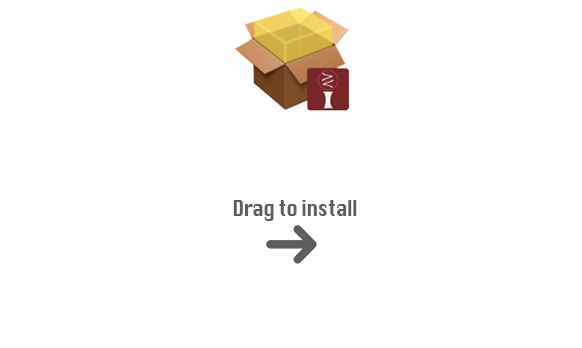
<style>
.page{position:relative;width:582px;height:348px;background:#ffffff}
.page>*{position:absolute;margin:0}
.t1{font:21.1px "Silom";letter-spacing:-0.05em;color:#5e5e5e;scale:0.87 1}
</style>
<div class="page">
<p class="t1" style="left:233px;top:200px;width:124px;height:21px">Drag to install</p>
</div>
